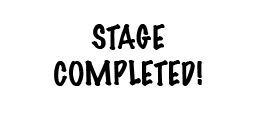
<style>
.page{position:relative;width:256px;height:128px;background:#ffffff}
.page>*{position:absolute;margin:0}
.t1{font:30px "MarkerFelt-Thin";color:#000000}
</style>
<div class="page">
<p class="t1" style="left:54px;top:24px;width:148px;height:62px;text-align:center">STAGE <br>COMPLETED!</p>
</div>
